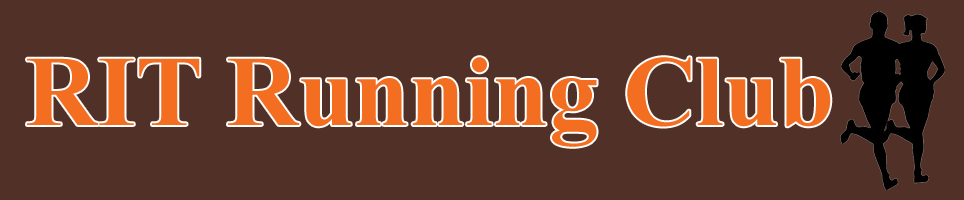
<style>
.page{position:relative;width:964px;height:200px;background:#513127}
.page>*{position:absolute;margin:0}
.t1{font:100px "TimesNewRomanPS-BoldMT";color:#f36e21}
</style>
<div class="page">
<p class="t1" style="left:27px;top:57px;width:804px;height:90px">RIT Running Club</p>
</div>
